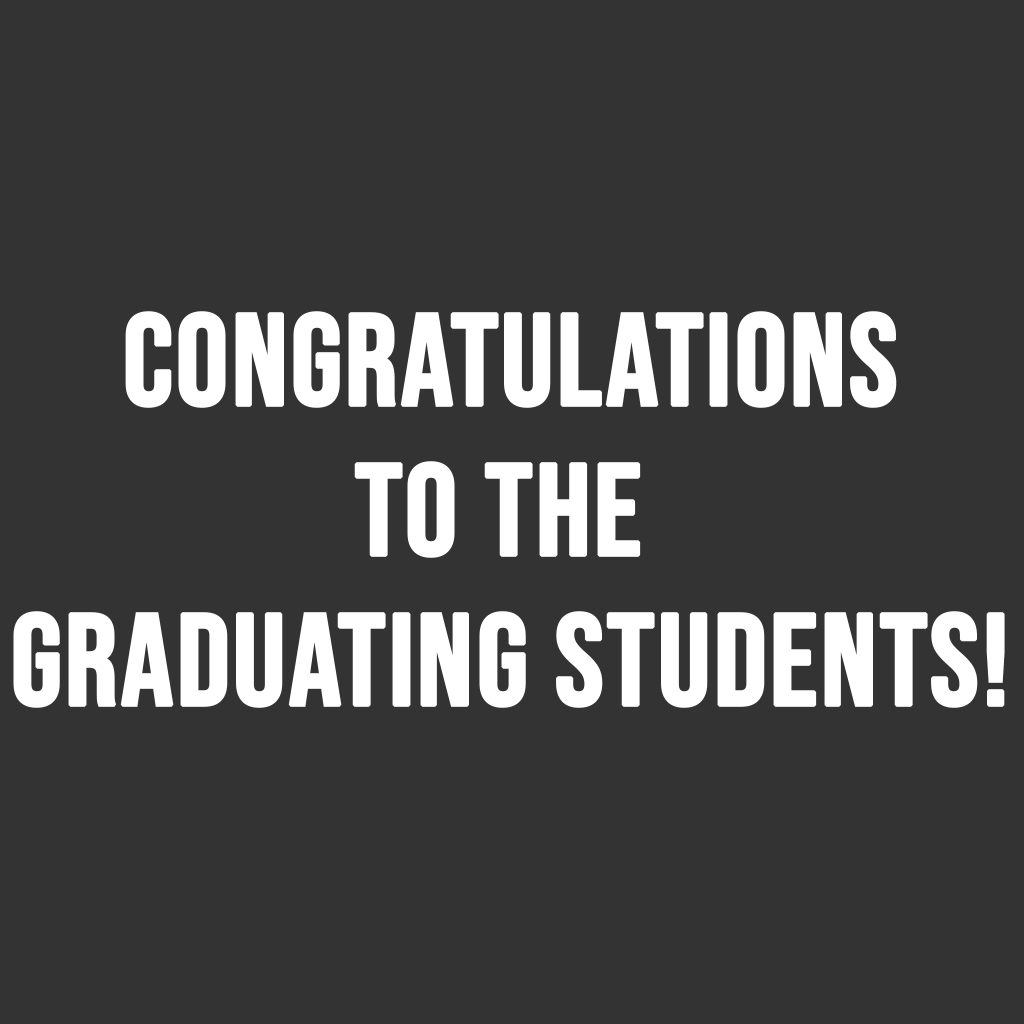
<style>
.page{position:relative;width:1024px;height:1024px;background:#333333}
.page>*{position:absolute;margin:0}
.t1{font:130px/150px "BebasNeue-Regular";color:#ffffff;font-weight:bold}
</style>
<div class="page">
<p class="t1" style="left:13px;top:311px;width:992px;height:397px;text-align:center">CONGRATULATIONS<br>TO THE <br>GRADUATING STUDENTS!</p>
</div>
